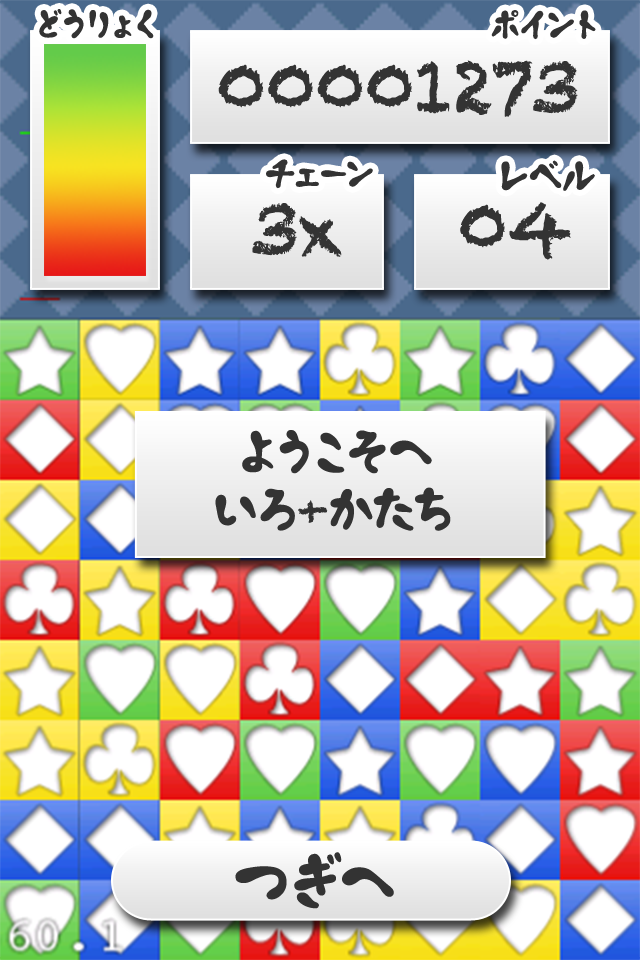
<style>
.page{position:relative;width:640px;height:960px}
.page>*{position:absolute;margin:0}
.t1{font:32px "Toneri";color:#333333}
.t2{font:72px "Chalkduster";color:#333333}
.t3{font:36px "Toneri";color:#333333}
.t4{font:48px "Toneri";color:#333333}
.t5{font:48px "Chalkduster";color:#333333}
.t6{font:60px "Toneri";color:#333333}
</style>
<div class="page">
<p class="t1" style="left:39px;top:9px;width:115px;height:30px">どうりょく</p>
<p class="t1" style="left:491px;top:10px;width:105px;height:30px">ポイント</p>
<p class="t2" style="left:218px;top:60px;width:360px;height:57px">00001273</p>
<p class="t1" style="left:266px;top:159px;width:107px;height:30px">チェーン</p>
<p class="t3" style="left:501px;top:160px;width:94px;height:31px">レベル</p>
<p class="t2" style="left:252px;top:203px;width:90px;height:54px">3x</p>
<p class="t2" style="left:460px;top:202px;width:111px;height:58px">04</p>
<p class="t4" style="left:215px;top:430px;width:236px;height:101px;text-align:center">ようこそへ<br>いろ<span class="t5">+</span>かたち</p>
<p class="t6" style="left:235px;top:852px;width:159px;height:57px">つぎへ</p>
</div>
